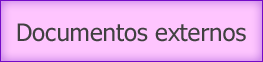
<style>
.page{position:relative;width:263px;height:62px;background:#fec5fe}
.page>*{position:absolute;margin:0}
.t1{font:24px "Tahoma";color:#404040}
</style>
<div class="page">
<p class="t1" style="left:17px;top:23px;width:229px;height:19px">Documentos externos</p>
</div>
